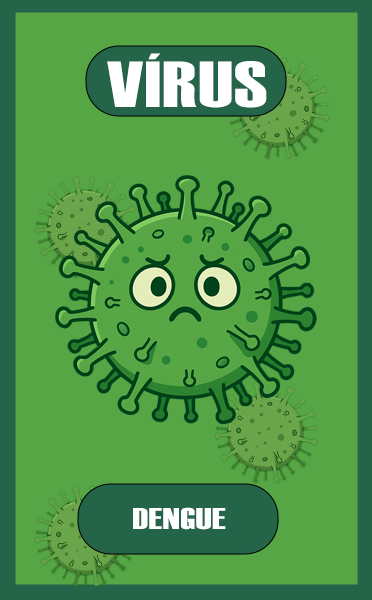
<style>
.page{position:relative;width:372px;height:600px;background:#56a645}
.page>*{position:absolute;margin:0}
.t1{font:65px "Haettenschweiler";letter-spacing:0.015em;color:#ffffff;scale:1.35 1}
.t2{font:30px "Haettenschweiler";letter-spacing:0.015em;color:#ffffff;scale:1.35 1}
</style>
<div class="page">
<p class="t1" style="left:107px;top:53px;width:160px;height:55px">VÍRUS</p>
<p class="t2" style="left:133px;top:507px;width:93px;height:23px">DENGUE</p>
</div>
